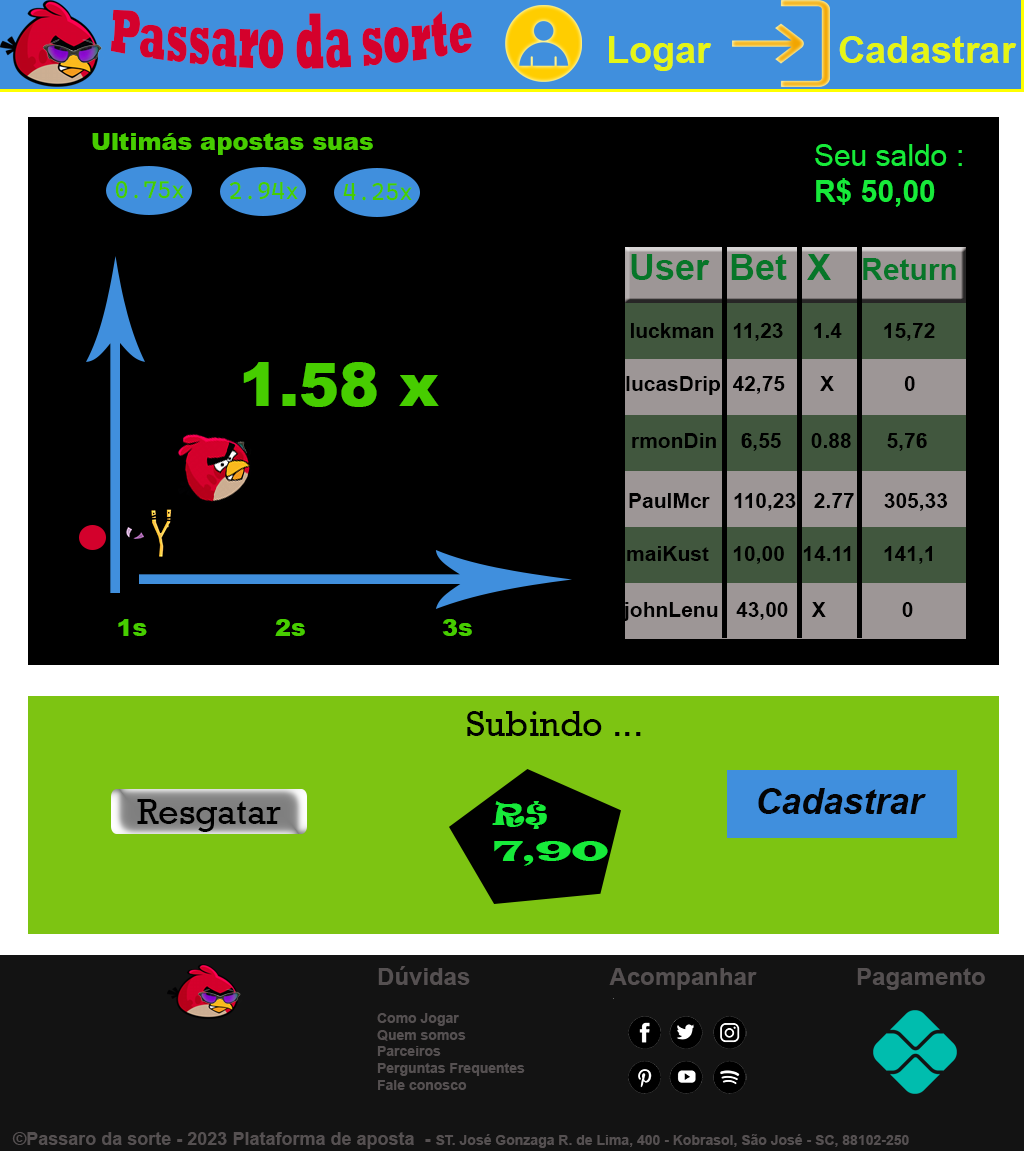
<style>
.page{position:relative;width:1024px;height:1151px;background:#000000}
.page>*{position:absolute;margin:0}
.t1{font:36px "Rockwell-ExtraBold";color:#d4012c}
.t2{font:38px "Arial-BoldMT";color:#e5f515}
.t3{font:24px "Arial-Black";color:#47cd00}
.t4{font:30px "ArialMT";color:#17ea3a}
.t5{font:30px "Arial-BoldMT";color:#17ea3a}
.t6{font:24px "CascadiaMono-Regular";color:#47cd00}
.t7{font:36px "Arial-BoldMT";color:#077629}
.t8{font:30px "Arial-BoldMT";color:#077629}
.t9{font:21px "Arial-BoldMT";color:#000000}
.t10{font:60px "Arial-Black";color:#47cd00}
.t11{font:36px "Rockwell";color:#000000}
.t12{font:36px "Arial-BoldItalicMT";color:#040404}
.t13{font:30px "LatinWide";color:#17ea3a}
.t14{font:30px "Ravie";color:#17ea3a}
.t15{font:24px "Arial-BoldMT";color:#555051}
.t16{font:14px "Arial-BoldMT";color:#555051}
.t17{font:18px "Arial-BoldMT";color:#555051}
</style>
<div class="page">
<p class="t1" style="left:110px;top:9px;width:362px;height:60px">Passaro da sorte</p>
<p class="t2" style="left:609px;top:36px;width:408px;height:35px">Logar            Cadastrar</p>
<p class="t3" style="left:92px;top:133px;width:281px;height:22px">Ultimás apostas suas</p>
<p class="t4" style="left:815px;top:144px;width:147px;height:63px">Seu saldo :<br><span class="t5">R$ 50,00</span></p>
<p class="t6" style="left:115px;top:181px;width:69px;height:18px">0.75x</p>
<p class="t6" style="left:229px;top:182px;width:69px;height:18px">2.94x</p>
<p class="t6" style="left:343px;top:183px;width:69px;height:18px">4.25x</p>
<p class="t7" style="left:631px;top:254px;width:325px;height:26px">User  Bet  X   <span class="t8">Return</span></p>
<p class="t9" style="left:631px;top:323px;width:304px;height:18px">luckman   11,23     1.4       15,72</p>
<p class="t10" style="left:243px;top:362px;width:196px;height:45px">1.58 x</p>
<p class="t9" style="left:626px;top:376px;width:289px;height:19px">lucasDrip  42,75      X            0</p>
<p class="t9" style="left:632px;top:433px;width:295px;height:18px">rmonDin    6,55     0.88      5,76</p>
<p class="t9" style="left:629px;top:493px;width:319px;height:18px">PaulMcr    110,23   2.77     305,33</p>
<p class="t9" style="left:627px;top:546px;width:305px;height:18px">maiKust    10,00   14.11     141,1</p>
<p class="t9" style="left:623px;top:602px;width:290px;height:19px">johnLenu   43,00    X             0</p>
<p class="t3" style="left:118px;top:619px;width:354px;height:17px">1s                2s                 3s</p>
<p class="t11" style="left:467px;top:711px;width:174px;height:25px">Subindo ...</p>
<p class="t12" style="left:758px;top:788px;width:168px;height:26px">Cadastrar</p>
<p class="t11" style="left:137px;top:799px;width:144px;height:33px">Resgatar</p>
<p class="t13" style="left:492px;top:801px;width:116px;height:65px"><span class="t14">R$ <br></span>7,90</p>
<p class="t15" style="left:378px;top:966px;width:607px;height:24px">Dúvidas                     Acompanhar               Pagamento</p>
<p class="t16" style="left:377px;top:1013px;width:148px;height:77px">Como Jogar<br>Quem somos<br>Parceiros<br>Perguntas Frequentes<br>Fale conosco</p>
<p class="t16" style="left:12px;top:1132px;width:897px;height:17px"><span class="t17"> <br>   ©Passaro da sorte - 2023 Plataforma de aposta  - </span>ST. José Gonzaga R. de Lima, 400 - Kobrasol, São José - SC, 88102-250</p>
</div>
